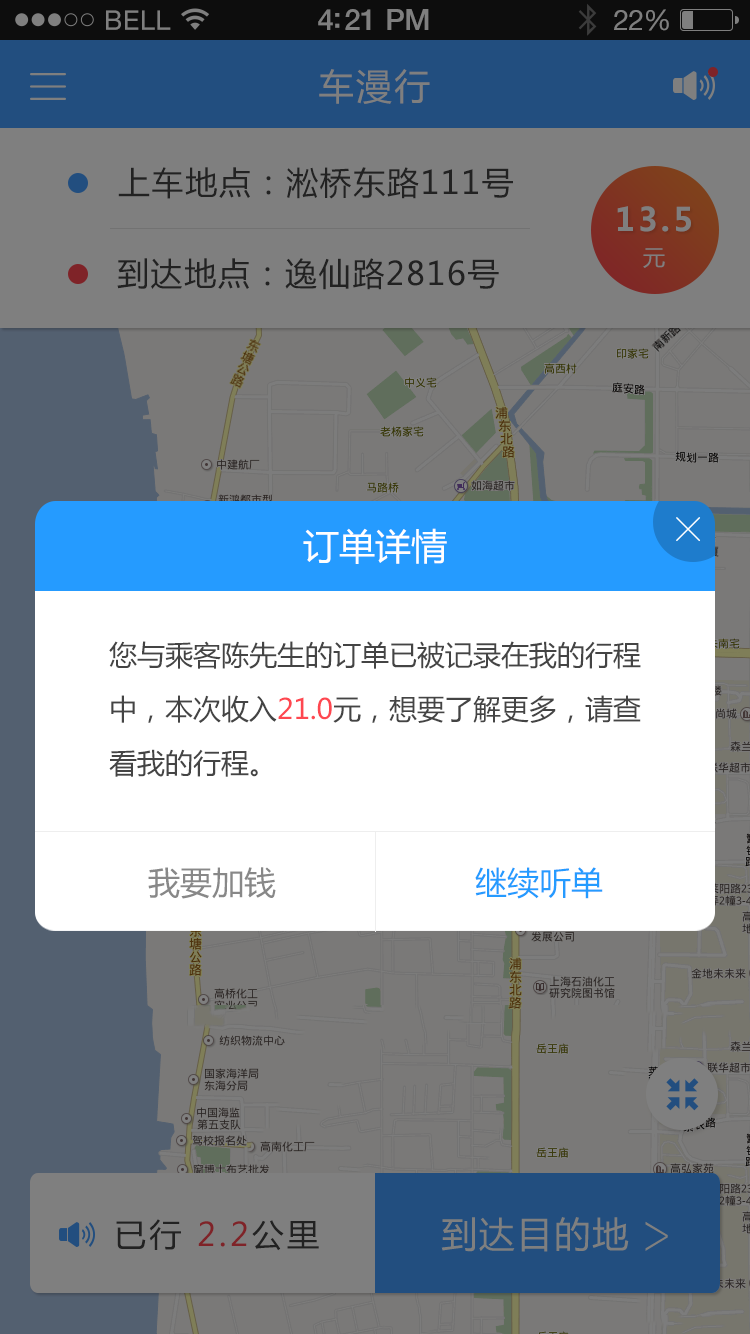
<style>
.page{position:relative;width:750px;height:1334px;background:#ffffff}
.page>*{position:absolute;margin:0}
.t1{font:36px "MicrosoftYaHei";letter-spacing:0.05em;color:#7f7f7f}
.t2{font:32px "MicrosoftYaHei";letter-spacing:0.05em;color:#222222}
.t3{font:32px "MicrosoftYaHei-Bold";letter-spacing:0.1em;color:#7f7f7f}
.t4{font:22px "MicrosoftYaHei";letter-spacing:0.1em;color:#7f7f7f}
.t5{font:36px "MicrosoftYaHei";color:#ffffff}
.t6{font:28px/54px "MicrosoftYaHei";color:#444444}
.t7{font:28px/54px "MicrosoftYaHei";color:#fe4750}
.t8{font:32px "MicrosoftYaHei";color:#888888}
.t9{font:32px "MicrosoftYaHei";color:#259bff}
.t10{font:32px "MicrosoftYaHei";letter-spacing:0.1em;color:#222222}
</style>
<div class="page">
<p class="t1" style="left:319px;top:69px;width:111px;height:35px">车漫行</p>
<p class="t2" style="left:118px;top:167px;width:395px;height:32px">上车地点：淞桥东路111号</p>
<p class="t3" style="left:617px;top:206px;width:74px;height:26px">13.5</p>
<p class="t4" style="left:643px;top:248px;width:22px;height:20px">元</p>
<p class="t2" style="left:117px;top:258px;width:382px;height:32px">到达地点：逸仙路2816号</p>
<p class="t5" style="left:303px;top:528px;width:144px;height:36px">订单详情</p>
<p class="t6" style="left:109px;top:641px;width:532px;height:136px">您与乘客陈先生的订单已被记录在我的行程<br>中，本次收入<span class="t7">21.0</span>元，想要了解更多，请查<br>看我的行程。</p>
<p class="t8" style="left:148px;top:867px;width:128px;height:32px">我要加钱</p>
<p class="t9" style="left:475px;top:867px;width:128px;height:32px">继续听单</p>
<p class="t10" style="left:116px;top:1219px;width:203px;height:32px">已行 2.2公里</p>
</div>
